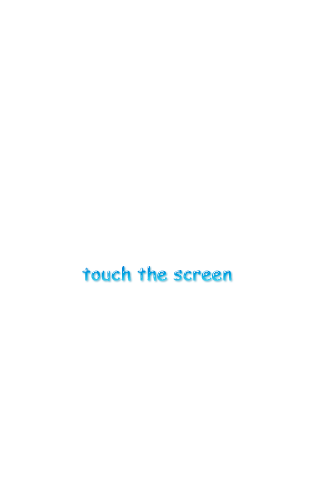
<style>
.page{position:relative;width:320px;height:480px;background:#ffffff}
.page>*{position:absolute;margin:0}
.t1{font:18px "ComicSansMS";font-weight:bold}
</style>
<div class="page">
<p class="t1" style="left:82px;top:266px;width:150px;height:15px">touch the screen</p>
</div>
